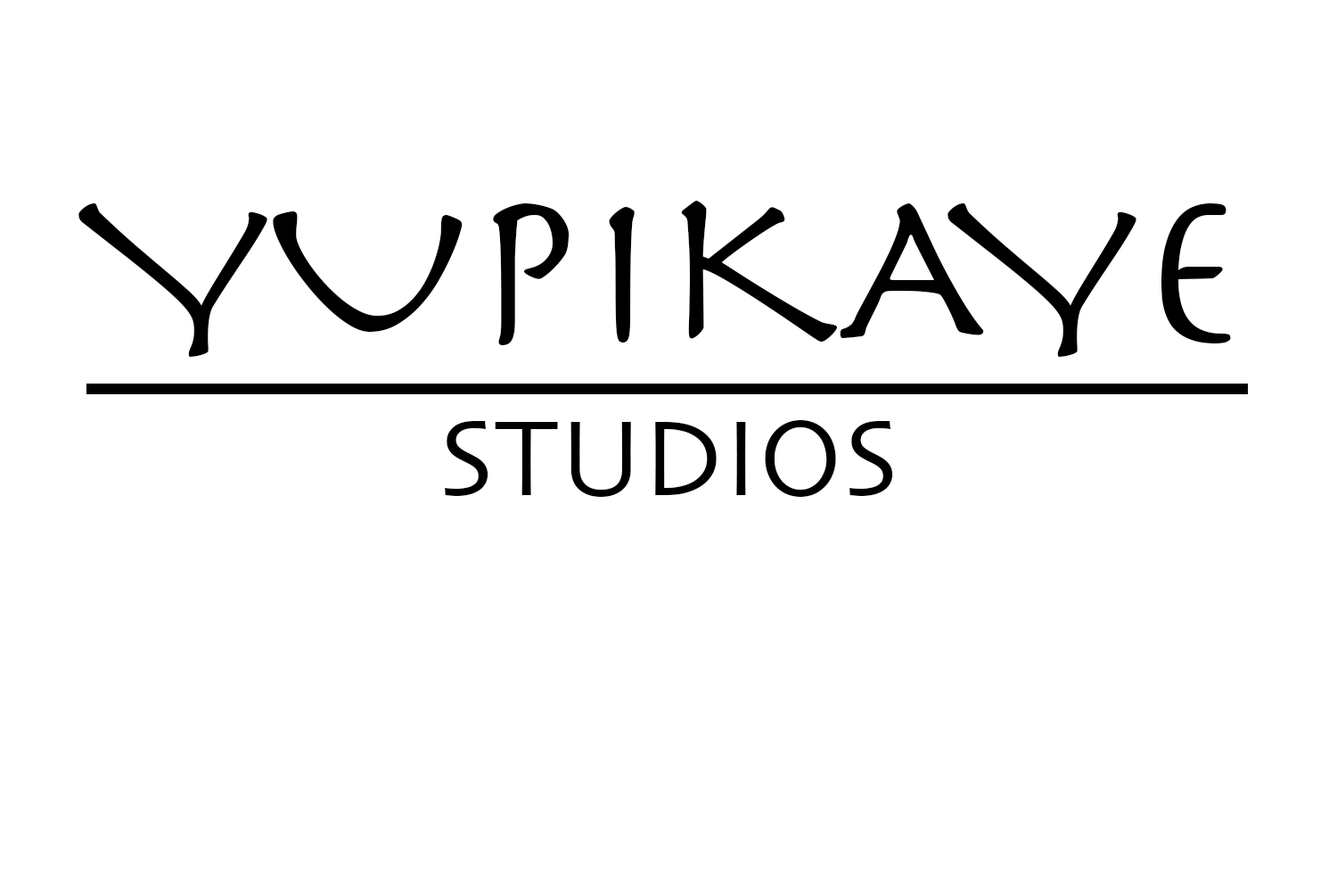
<style>
.page{position:relative;width:1337px;height:892px;background:#ffffff}
.page>*{position:absolute;margin:0}
.t1{font:222.9px "Herculanum";color:#000000}
.t2{font:111.5px "Skia-Regular";color:#000000}
</style>
<div class="page">
<p class="t1" style="left:78px;top:201px;width:1153px;height:156px">YUPIKAYE</p>
<p class="t2" style="left:445px;top:420px;width:448px;height:77px">STUDIOS</p>
</div>
